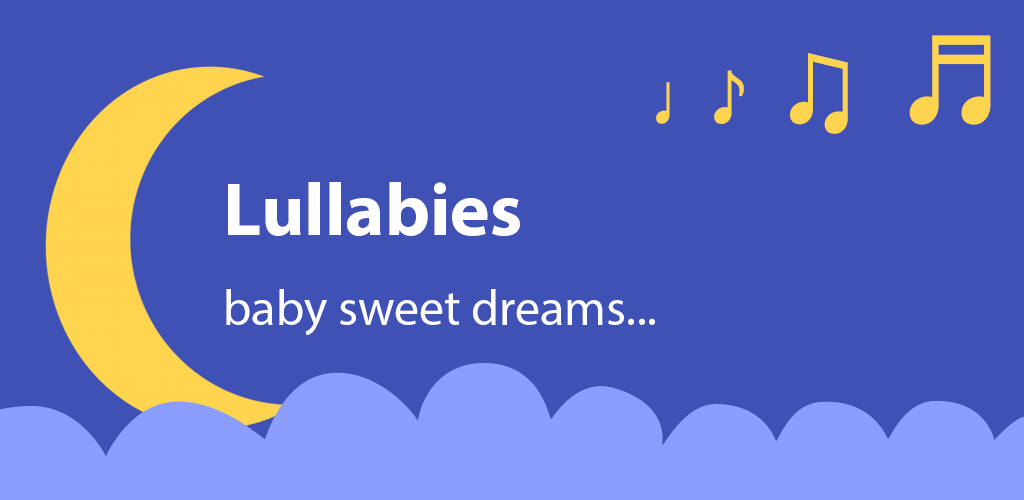
<style>
.page{position:relative;width:1024px;height:500px;background:#3f51b5}
.page>*{position:absolute;margin:0}
.t1{font:58.3px "SegoeUISymbol";color:#ffd54f}
.t2{font:75px "SegoeUISymbol";color:#ffd54f}
.t3{font:100px "SegoeUISymbol";color:#ffd54f}
.t4{font:125px "SegoeUISymbol";color:#ffd54f}
.t5{font:50px "MyriadPro-Regular";color:#ffffff}
.t6{font:75px "MyriadPro-Bold";color:#ffffff}
</style>
<div class="page">
<p class="t1" style="left:656px;top:35px;width:335px;height:99px">♩ <span class="t2">♪ </span><span class="t3">♫</span><span class="t4"> ♬</span></p>
<p class="t5" style="left:226px;top:182px;width:429px;height:154px"><span class="t6">Lullabies<br><br></span>baby sweet dreams...</p>
</div>
